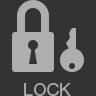
<style>
.page{position:relative;width:96px;height:96px;background:#333333}
.page>*{position:absolute;margin:0}
.t1{font:18px "HelveticaNeueLTStd-Roman";color:#aeaeae;text-transform:uppercase}
</style>
<div class="page">
<p class="t1" style="left:24px;top:83px;width:47px;height:13px">LOCK</p>
</div>
